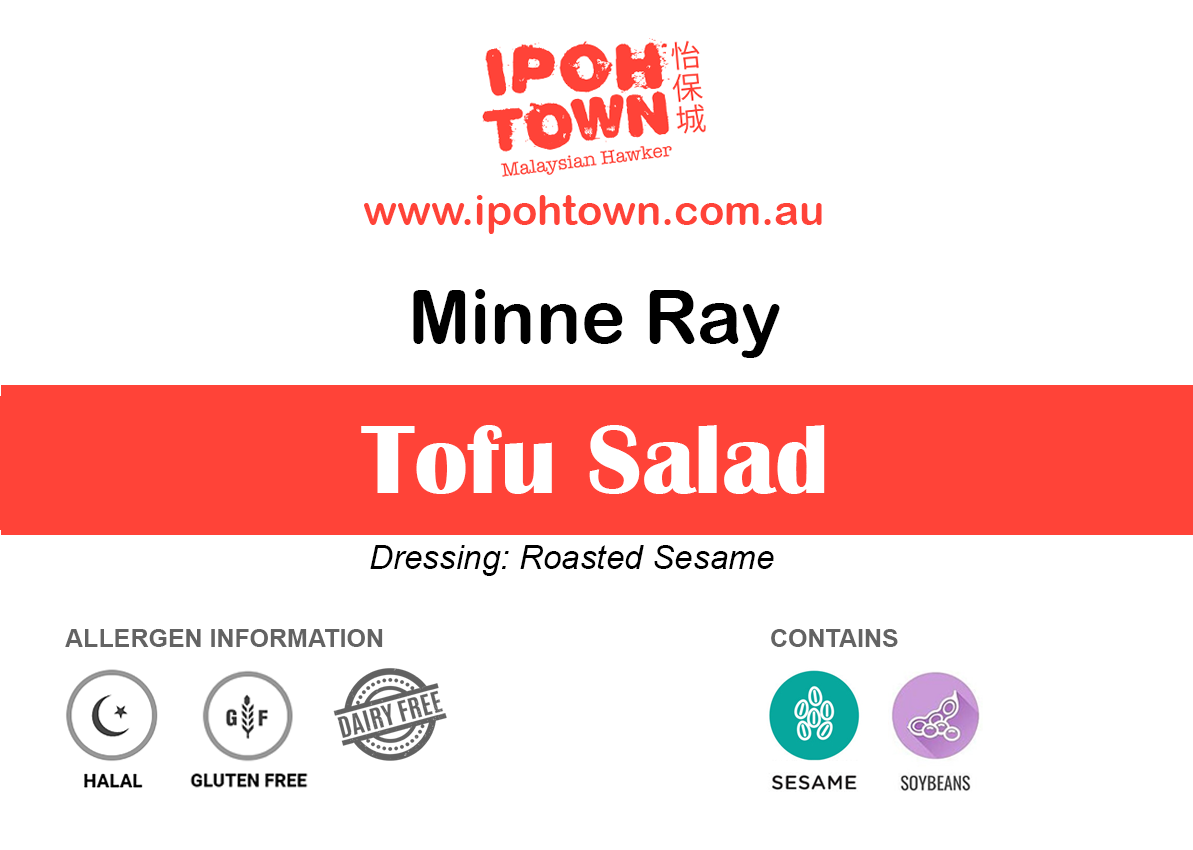
<style>
.page{position:relative;width:1193px;height:850px;background:#ffffff}
.page>*{position:absolute;margin:0}
.t1{font:41.7px "ArialRoundedMTBold";color:#ff4338}
.t2{font:75px "ArialRoundedMTBold";color:#000000}
.t3{font:100px "BritannicBold";color:#ffffff}
.t4{font:33.3px "Arial-ItalicMT";color:#000000}
.t5{font:25px "Arial-BoldMT";color:#636363}
</style>
<div class="page">
<p class="t1" style="left:364px;top:195px;width:458px;height:39px">www.ipohtown.com.au</p>
<p class="t2" style="left:413px;top:289px;width:367px;height:69px">Minne Ray</p>
<p class="t3" style="left:361px;top:425px;width:464px;height:69px">Tofu Salad</p>
<p class="t4" style="left:370px;top:545px;width:404px;height:31px">Dressing: Roasted Sesame</p>
<p class="t5" style="left:65px;top:629px;width:318px;height:18px">ALLERGEN INFORMATION</p>
<p class="t5" style="left:771px;top:629px;width:127px;height:18px">CONTAINS</p>
</div>
